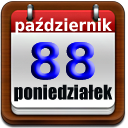
<style>
.page{position:relative;width:128px;height:128px}
.page>*{position:absolute;margin:0}
.t1{font:16.7px "DejaVuSansCondensed-Bold";color:#ffffff}
.t2{font:50px "DejaVuSans-Bold"}
.t3{font:18.8px "Impact";color:#06090d}
</style>
<div class="page">
<p class="t1" style="left:15px;top:17px;width:97px;height:18px">październik</p>
<p class="t2" style="left:31px;top:42px;width:64px;height:38px">88</p>
<p class="t2" style="left:31px;top:42px;width:64px;height:38px">88</p>
<p class="t3" style="left:14px;top:84px;width:99px;height:18px">poniedziałek</p>
</div>
